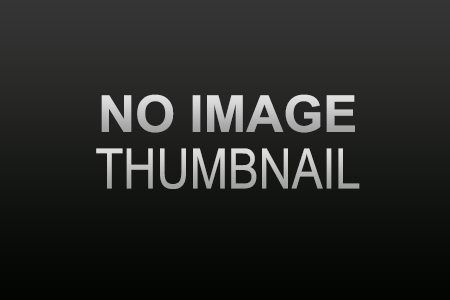
<style>
.page{position:relative;width:450px;height:300px}
.page>*{position:absolute;margin:0}
.t1{font:50.8px "Arial-BoldMT"}
.t2{font:55.5px "ArialNarrow"}
</style>
<div class="page">
<p class="t1" style="left:101px;top:94px;width:254px;height:39px">NO IMAGE</p>
<p class="t2" style="left:96px;top:148px;width:264px;height:41px">THUMBNAIL</p>
</div>
